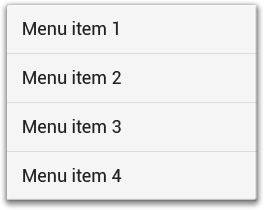
<style>
.page{position:relative;width:264px;height:210px;background:#f5f5f5}
.page>*{position:absolute;margin:0}
.t1{font:18px "Roboto-Regular";color:#222222}
</style>
<div class="page">
<p class="t1" style="left:23px;top:21px;width:95px;height:14px">Menu item 1</p>
<p class="t1" style="left:23px;top:70px;width:98px;height:14px">Menu item 2</p>
<p class="t1" style="left:23px;top:119px;width:98px;height:14px">Menu item 3</p>
<p class="t1" style="left:23px;top:168px;width:99px;height:14px">Menu item 4</p>
</div>
